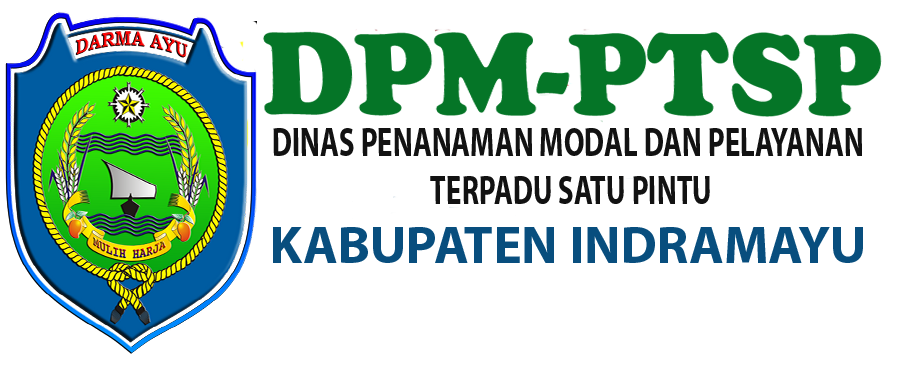
<style>
.page{position:relative;width:900px;height:376px;background:#ffffff}
.page>*{position:absolute;margin:0}
.t1{font:40.2px "MyriadPro-Bold";color:#121212;scale:0.72 1}
.t2{font:53px "MyriadPro-Bold";color:#084e7e}
</style>
<div class="page">
<p class="t1" style="left:273px;top:128px;width:589px;height:76px;text-align:center">DINAS PENANAMAN MODAL DAN PELAYANAN <br>TERPADU SATU PINTU</p>
<p class="t2" style="left:273px;top:227px;width:590px;height:36px">KABUPATEN INDRAMAYU</p>
</div>
